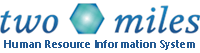
<style>
.page{position:relative;width:200px;height:53px;background:#ffffff}
.page>*{position:absolute;margin:0}
.t1{font:11px "SegoeUI-Bold";color:#235a93}
</style>
<div class="page">
<p class="t1" style="left:4px;top:40px;width:191px;height:10px">Human Resource Information System</p>
</div>
